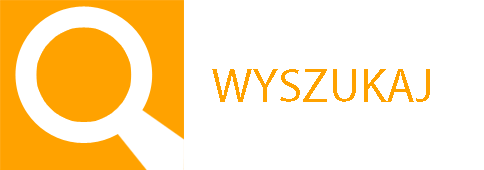
<style>
.page{position:relative;width:484px;height:170px;background:#ffffff}
.page>*{position:absolute;margin:0}
.t1{font:48.2px "MyriadPro-Regular";color:#ffa200}
</style>
<div class="page">
<p class="t1" style="left:212px;top:69px;width:218px;height:33px">WYSZUKAJ</p>
</div>
